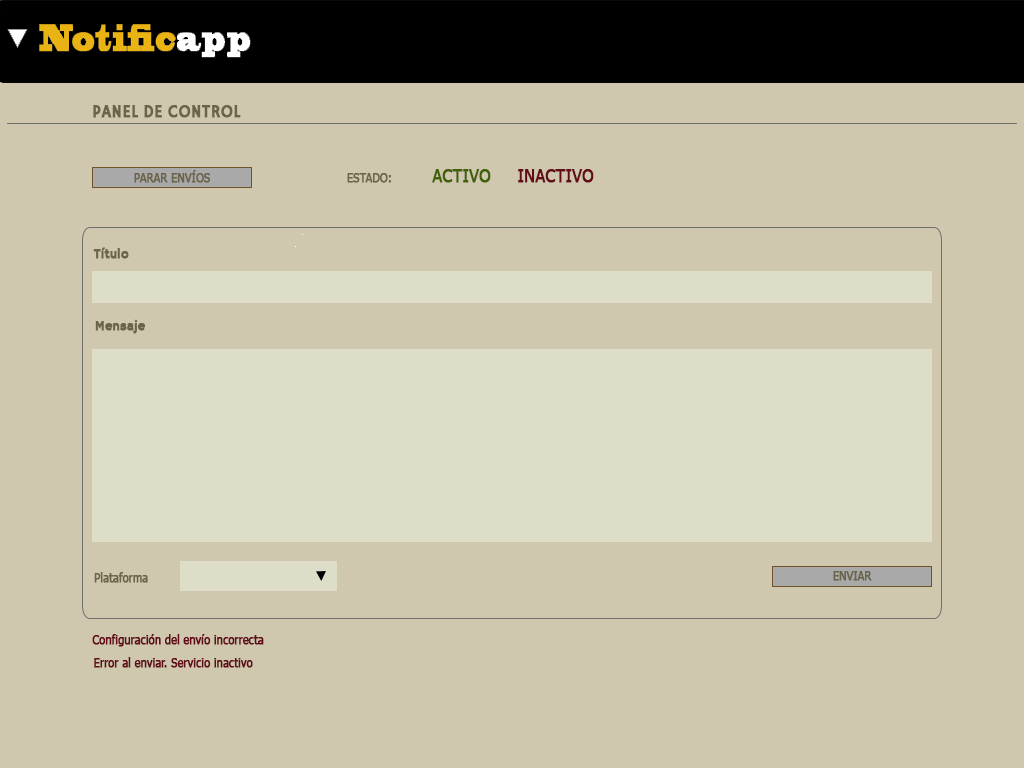
<style>
.page{position:relative;width:1024px;height:768px;background:#cfc8af}
.page>*{position:absolute;margin:0}
.t1{font:18px "HammersmithOne";color:#6c644a;font-weight:bold;scale:0.9 1}
.t2{font:12px "Tahoma";color:#6c644a;font-weight:bold;scale:0.9 1}
.t3{font:18px "Tahoma";color:#426107;font-weight:bold;scale:0.9 1}
.t4{font:18px "Tahoma";color:#620c18;font-weight:bold;scale:0.9 1}
.t5{font:14px "HammersmithOne";color:#6c644a;font-weight:bold;scale:0.9 1}
.t6{font:12px "Tahoma";color:#620c18;font-weight:bold;scale:0.9 1}
</style>
<div class="page">
<p class="t1" style="left:93px;top:105px;width:148px;height:13px">PANEL DE CONTROL</p>
<p class="t2" style="left:134px;top:170px;width:77px;height:13px">PARAR ENVÍOS</p>
<p class="t2" style="left:347px;top:173px;width:44px;height:10px">ESTADO:</p>
<p class="t3" style="left:432px;top:169px;width:59px;height:14px">ACTIVO</p>
<p class="t4" style="left:518px;top:169px;width:76px;height:14px">INACTIVO</p>
<p class="t5" style="left:93px;top:247px;width:36px;height:12px">Título</p>
<p class="t5" style="left:95px;top:319px;width:51px;height:15px">Mensaje</p>
<p class="t2" style="left:94px;top:572px;width:54px;height:11px">Plataforma</p>
<p class="t2" style="left:833px;top:571px;width:39px;height:10px">ENVIAR</p>
<p class="t6" style="left:92px;top:634px;width:172px;height:13px">Configuración del envío incorrecta</p>
<p class="t6" style="left:94px;top:657px;width:159px;height:11px">Error al enviar. Servicio inactivo</p>
</div>
